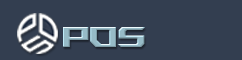
<style>
.page{position:relative;width:242px;height:60px;background:#333e50}
.page>*{position:absolute;margin:0}
.t1{font:28.3px "ROGFonts-Regular";letter-spacing:-0.01em;scale:1.15 1}
</style>
<div class="page">
<p class="t1" style="left:63px;top:27px;width:82px;height:20px">POS</p>
</div>
